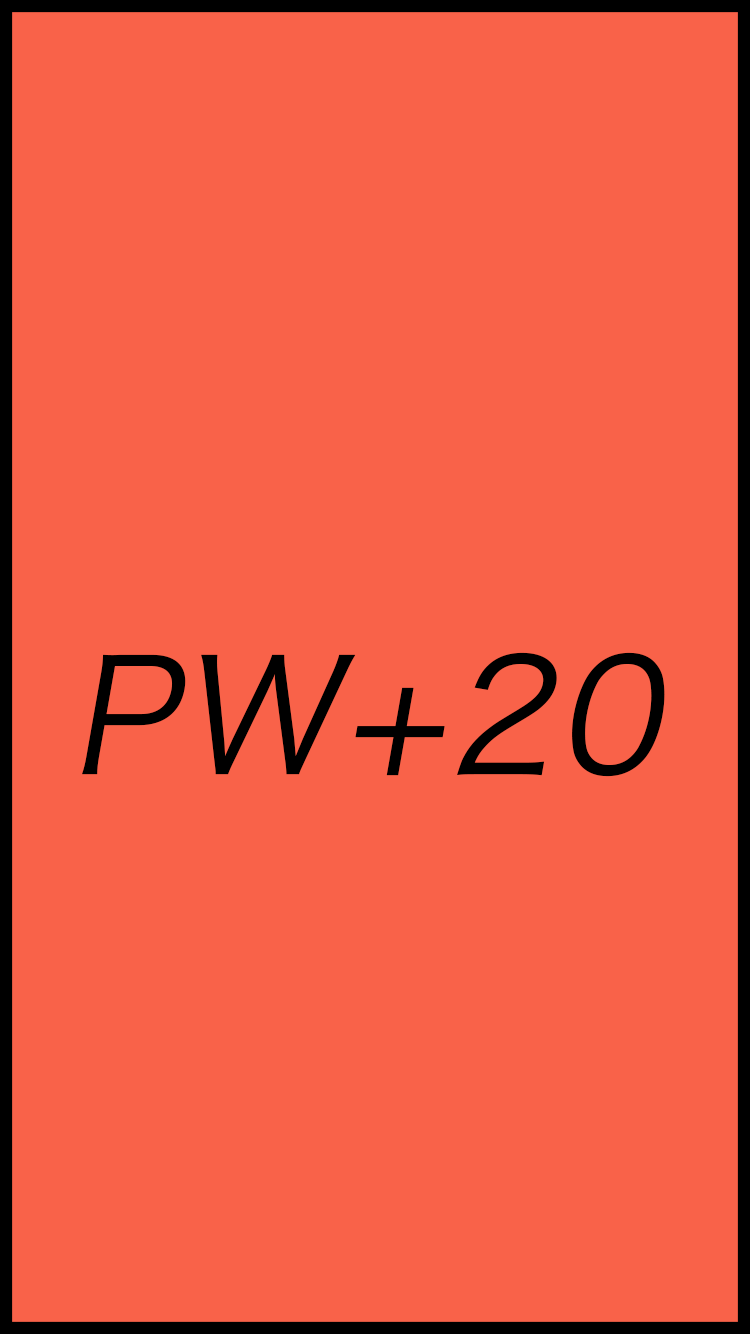
<style>
.page{position:relative;width:750px;height:1334px;background:#f96249}
.page>*{position:absolute;margin:0}
.t1{font:156.9px "HiraKakuPro-W3";color:#000000;font-weight:bold;font-style:italic}
</style>
<div class="page">
<p class="t1" style="left:82px;top:652px;width:583px;height:125px">PW+20</p>
</div>
